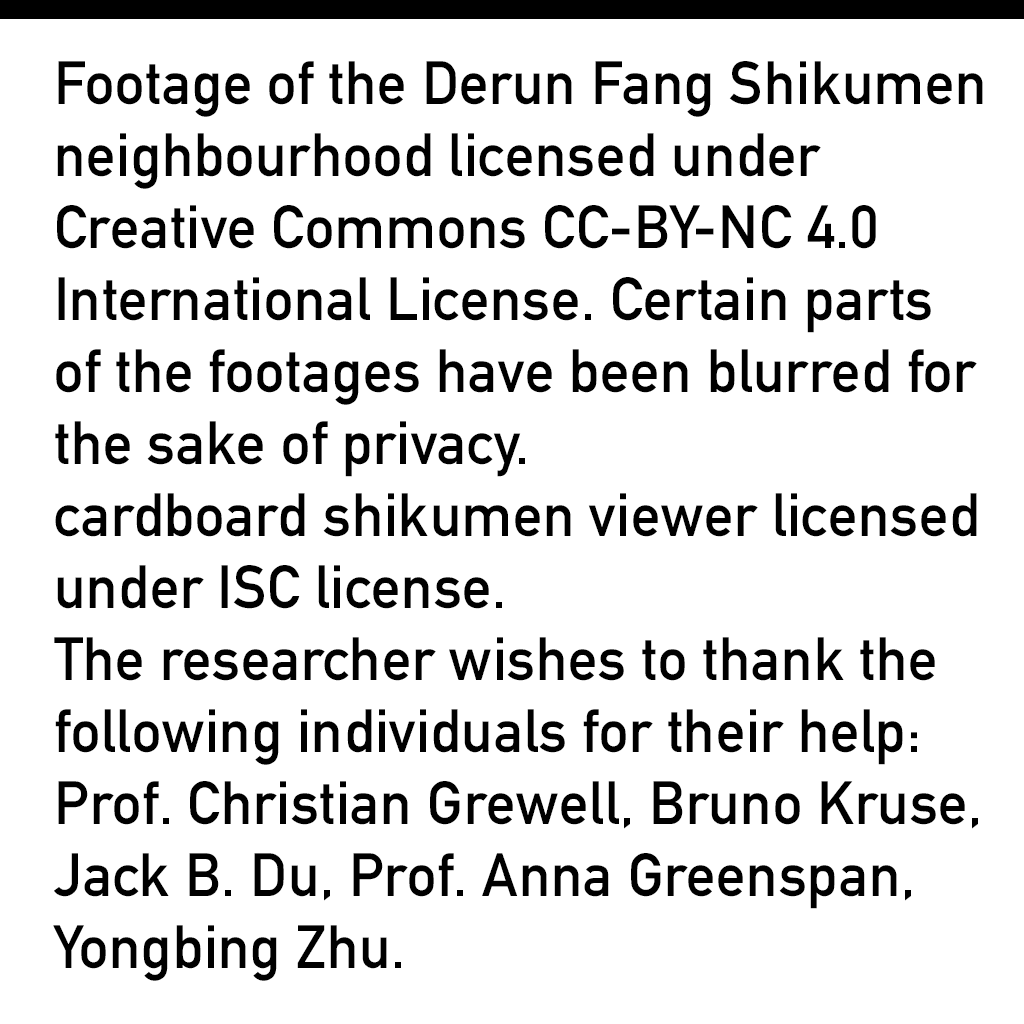
<style>
.page{position:relative;width:1024px;height:1024px;background:#ffffff}
.page>*{position:absolute;margin:0}
.t1{font:60px "DINAlternate-Bold";color:#000000}
</style>
<div class="page">
<p class="t1" style="left:53px;top:61px;width:930px;height:920px">Footage of the Derun Fang Shikumen<br>neighbourhood licensed under<br>Creative Commons CC-BY-NC 4.0<br>International License. Certain parts<br>of the footages have been blurred for<br>the sake of privacy. <br>cardboard shikumen viewer licensed<br>under ISC license. <br>The researcher wishes to thank the <br>following individuals for their help: <br>Prof. Christian Grewell, Bruno Kruse, <br>Jack B. Du, Prof. Anna Greenspan, <br>Yongbing Zhu.</p>
</div>
